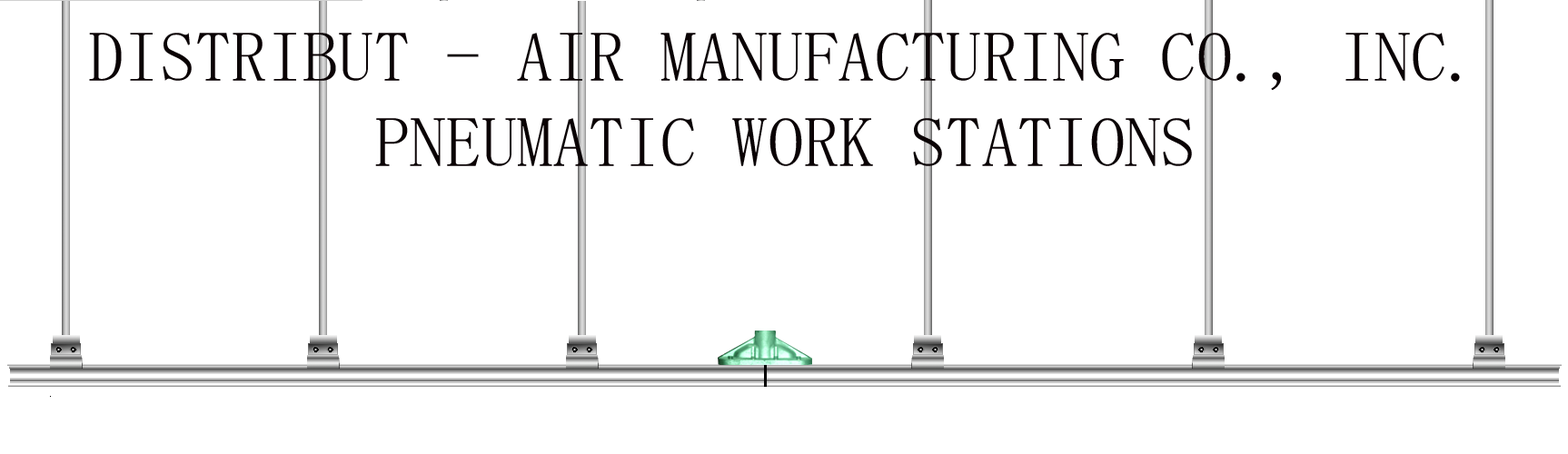
<style>
.page{position:relative;width:1568px;height:454px;background:#ffffff}
.page>*{position:absolute;margin:0}
.t1{font:71.5px "MS-Mincho";color:#0a0204}
</style>
<div class="page">
<p class="t1" style="left:89px;top:33px;width:1371px;height:133px;text-align:center">DISTRIBUT - AIR MANUFACTURING CO., INC.<br>PNEUMATIC WORK STATIONS</p>
</div>
